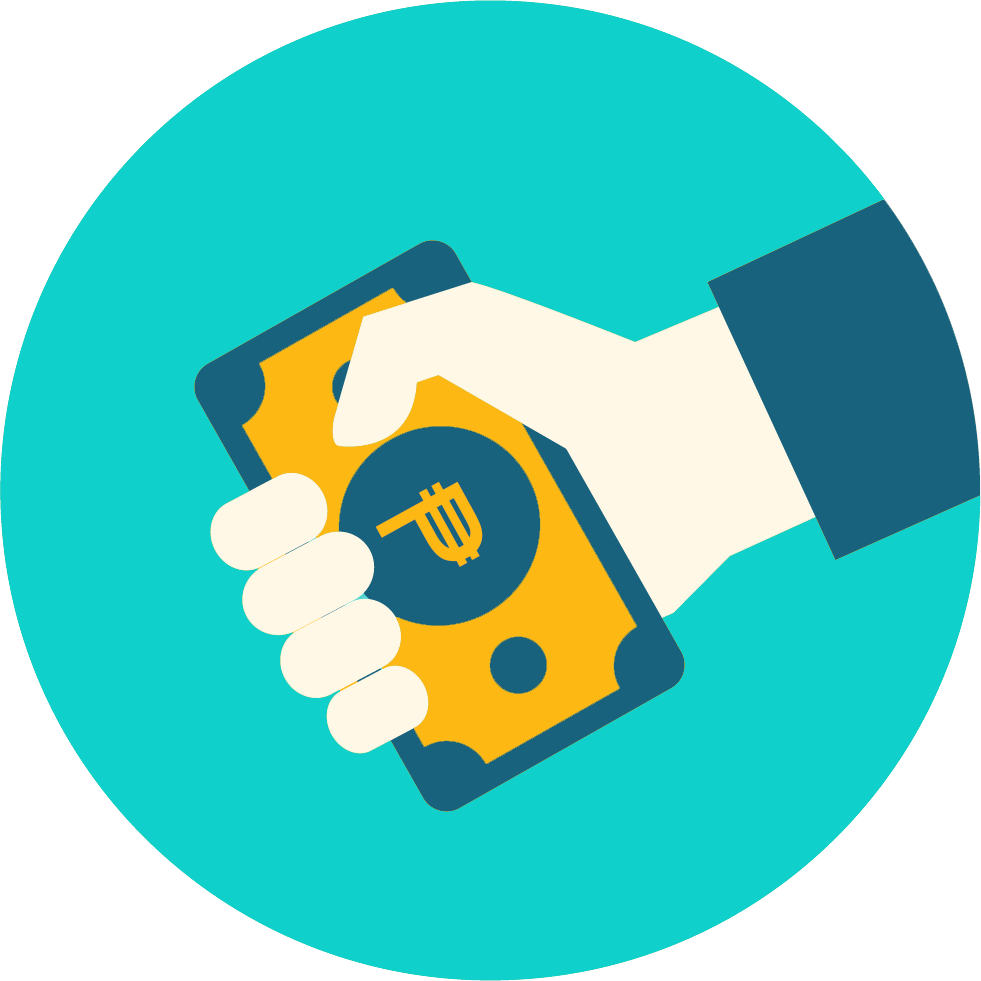
<style>
.page{position:relative;width:981px;height:981px;background:#0fd0ca}
.page>*{position:absolute;margin:0}
.t1{font:130px "ArialMT";color:#fdb813}
</style>
<div class="page">
<p class="t1" style="left:375px;top:481px;width:108px;height:86px;rotate:61deg">₱</p>
</div>
